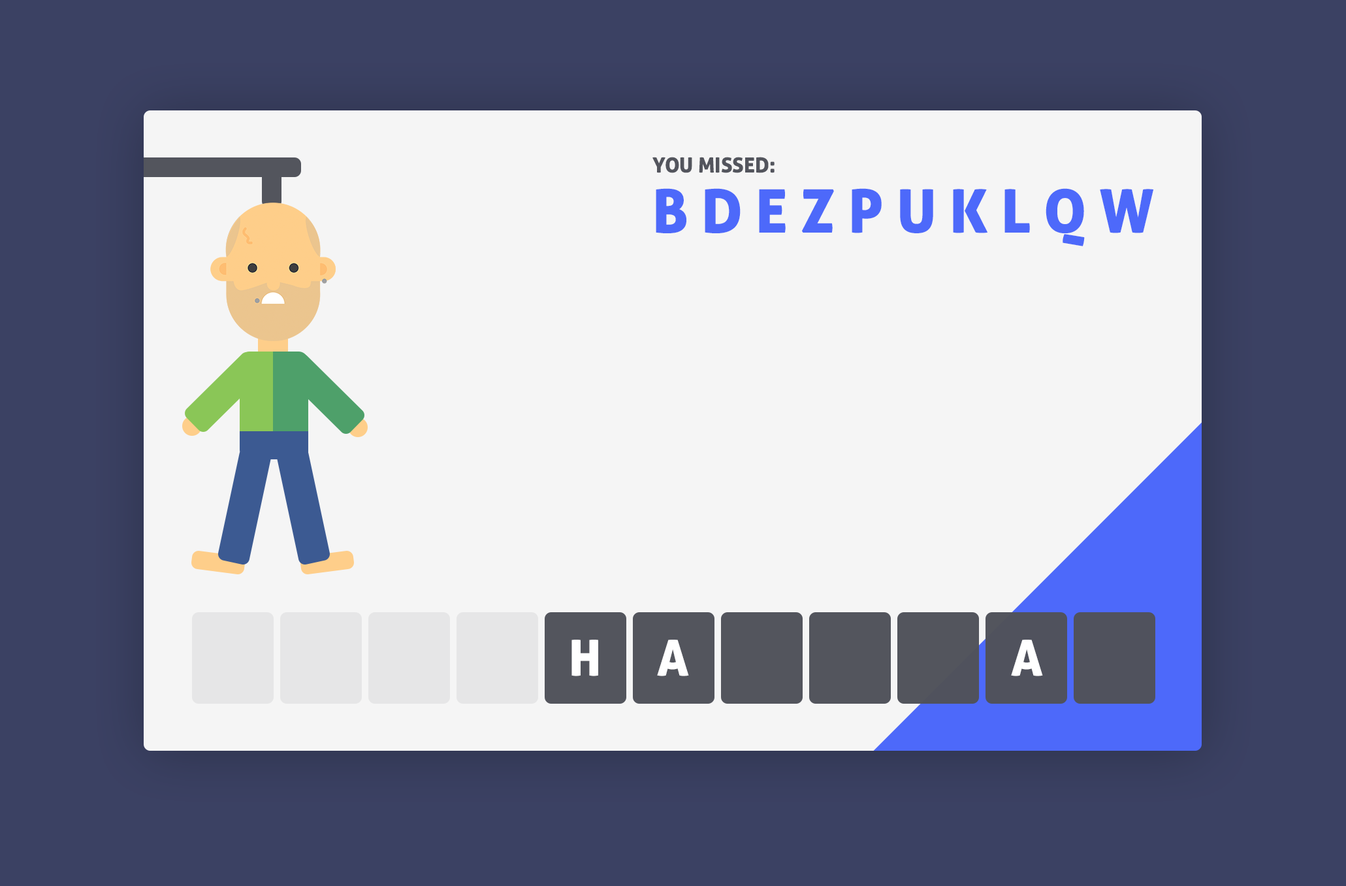
<style>
.page{position:relative;width:1346px;height:886px;background:#f5f5f5}
.page>*{position:absolute;margin:0}
.t1{font:20.9px "AllerDisplay";color:#53555d;text-transform:uppercase}
.t2{font:60.1px "AllerDisplay";color:#4d69fa}
.t3{font:49.6px "AllerDisplay";color:#ffffff}
</style>
<div class="page">
<p class="t1" style="left:653px;top:157px;width:122px;height:16px">You missed:</p>
<p class="t2" style="left:656px;top:188px;width:498px;height:58px">B D E Z P U K L Q W</p>
<p class="t3" style="left:572px;top:639px;width:26px;height:37px">H</p>
<p class="t3" style="left:657px;top:639px;width:32px;height:37px">A</p>
<p class="t3" style="left:1011px;top:639px;width:32px;height:37px">A</p>
</div>
